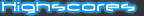
<style>
.page{position:relative;width:144px;height:16px;background:#0096ff}
.page>*{position:absolute;margin:0}
.t1{font:16px "ThundergodII";color:#ffffff}
</style>
<div class="page">
<p class="t1" style="left:2px;top:2px;width:133px;height:12px">Highscores</p>
</div>
